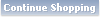
<style>
.page{position:relative;width:100px;height:17px}
.page>*{position:absolute;margin:0}
.t1{font:10px "Tahoma-Bold";color:#ffffff}
</style>
<div class="page">
<p class="t1" style="left:4px;top:3px;width:91px;height:10px">Continue Shopping</p>
</div>
